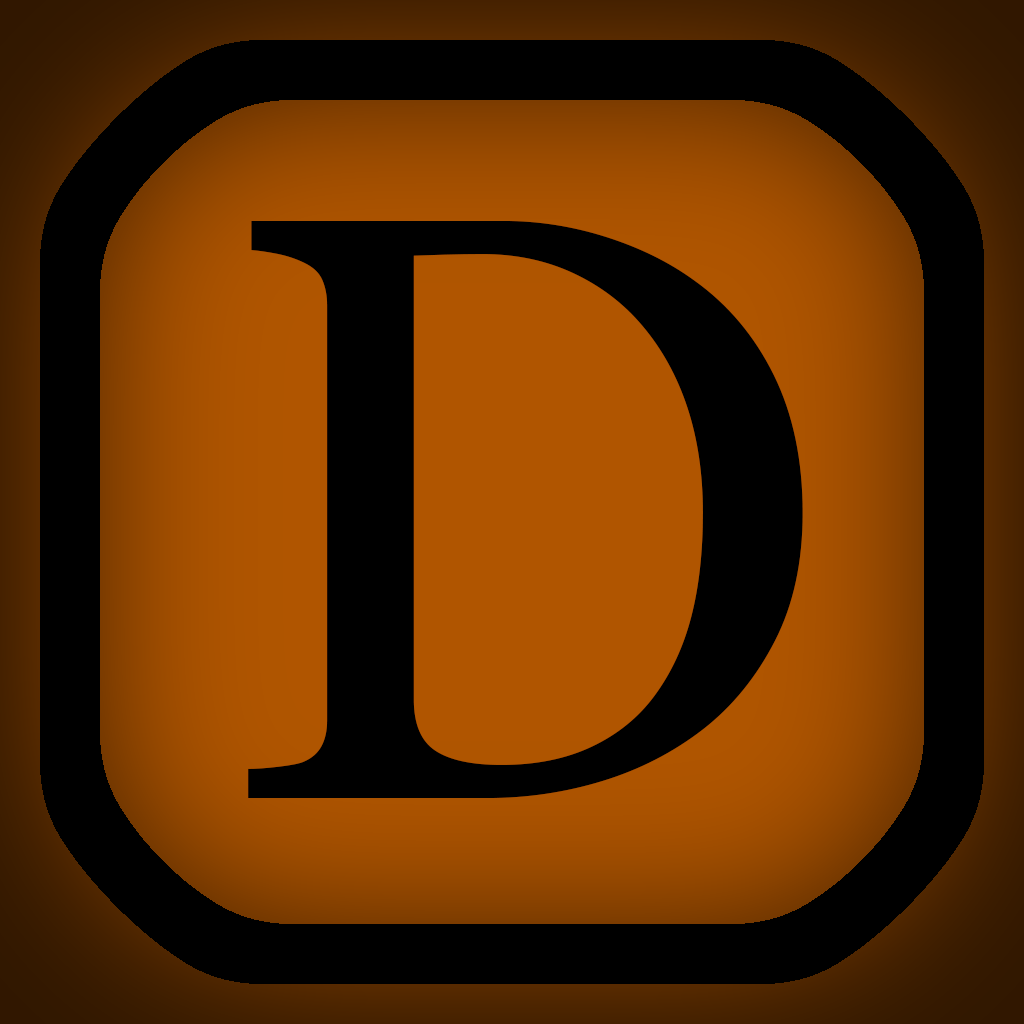
<style>
.page{position:relative;width:1024px;height:1024px;background:#000000}
.page>*{position:absolute;margin:0}
.t1{font:833.3px "Georgia";color:#000000}
</style>
<div class="page">
<p class="t1" style="left:248px;top:221px;width:555px;height:577px">D</p>
</div>
